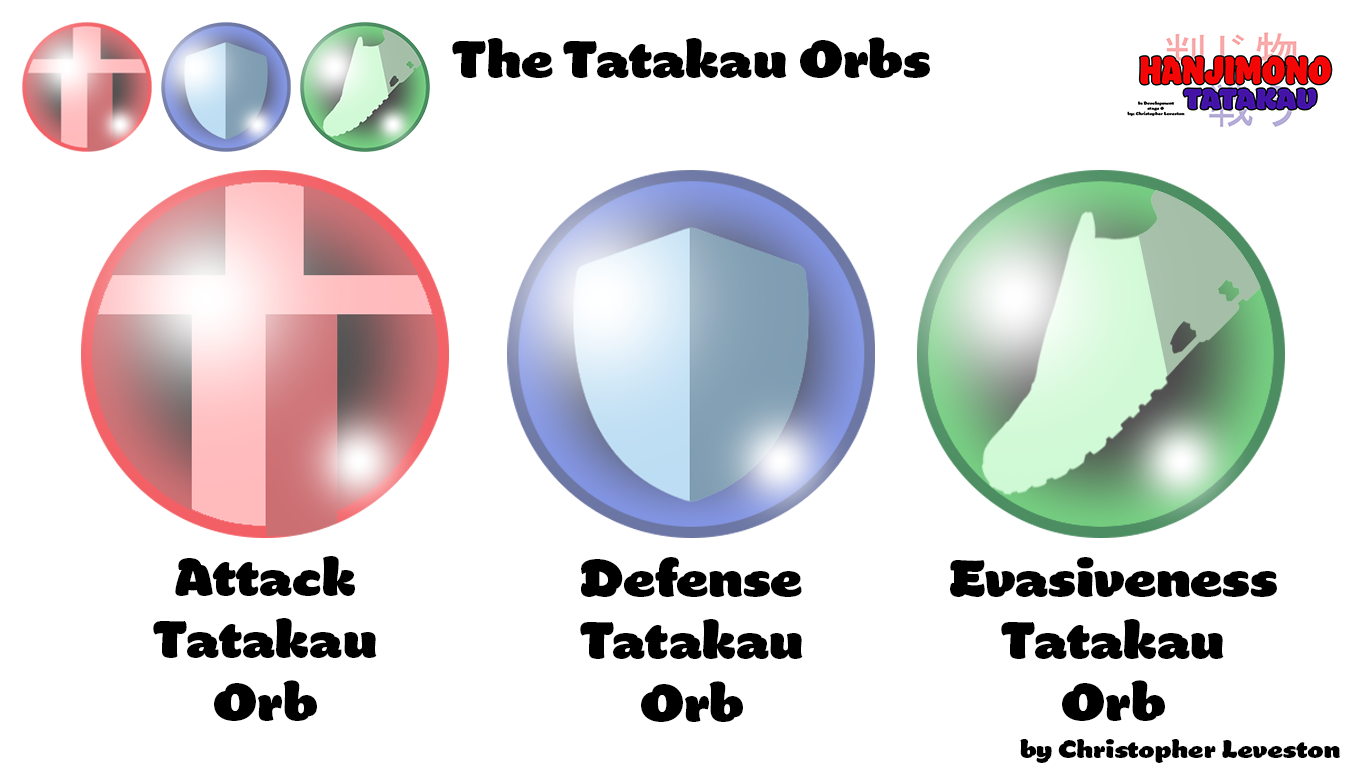
<style>
.page{position:relative;width:1366px;height:768px;background:#ffffff}
.page>*{position:absolute;margin:0}
.t1{font:51.8px "Manteiga-Gorda";color:#000000}
.t2{font:12px "Manteiga-Gorda";color:#000000}
</style>
<div class="page">
<p class="t1" style="left:452px;top:37px;width:478px;height:41px">The Tatakau Orbs</p>
<p class="t1" style="left:153px;top:556px;width:224px;height:165px;text-align:center">Attack<br>Tatakau<br>Orb</p>
<p class="t1" style="left:580px;top:557px;width:223px;height:165px;text-align:center">Defense<br>Tatakau<br>Orb</p>
<p class="t1" style="left:950px;top:557px;width:327px;height:164px;text-align:center">Evasiveness<br>Tatakau<br>Orb</p>
<p class="t2" style="left:1020px;top:739px;width:320px;height:24px">by Christopher Leveston</p>
</div>
